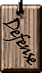
<style>
.page{position:relative;width:42px;height:73px}
.page>*{position:absolute;margin:0}
.t1{font:18px "VinerHandITC";letter-spacing:-0.08em;color:#000000;font-weight:bold;scale:0.9 1}
</style>
<div class="page">
<p class="t1" style="left:2px;top:17px;width:35px;height:49px;rotate:60deg">Defense</p>
</div>
